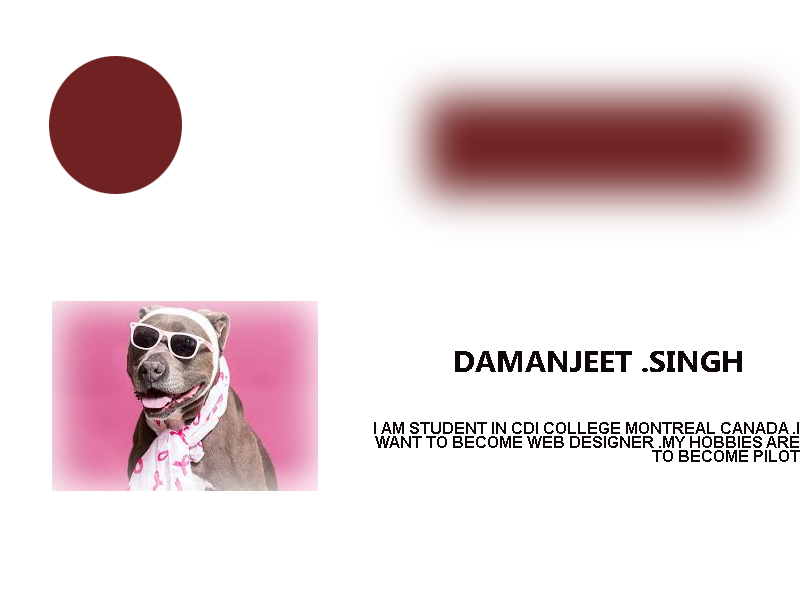
<style>
.page{position:relative;width:800px;height:600px;background:#ffffff}
.page>*{position:absolute;margin:0}
.t1{font:30px "MicrosoftPhagsPa-Bold";color:#0e0709}
.t2{font:16px/14px "Arial-BoldMT";color:#0e0709}
</style>
<div class="page">
<p class="t1" style="left:455px;top:351px;width:287px;height:21px">DAMANJEET .SINGH</p>
<p class="t2" style="left:374px;top:422px;width:426px;height:40px;text-align:right">I AM STUDENT IN CDI COLLEGE MONTREAL CANADA .I WANT TO BECOME WEB DESIGNER .MY HOBBIES ARE TO BECOME PILOT</p>
</div>
